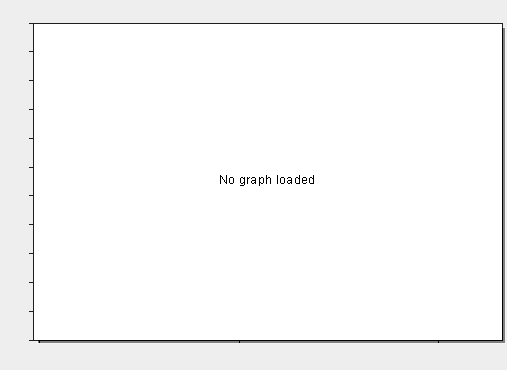
<style>
.page{position:relative;width:507px;height:370px;background:#ffffff}
.page>*{position:absolute;margin:0}
.t1{font:12px "ArialMT";letter-spacing:0.025em;color:#000000}
</style>
<div class="page">
<p class="t1" style="left:220px;top:175px;width:94px;height:11px">No graph loaded</p>
</div>
